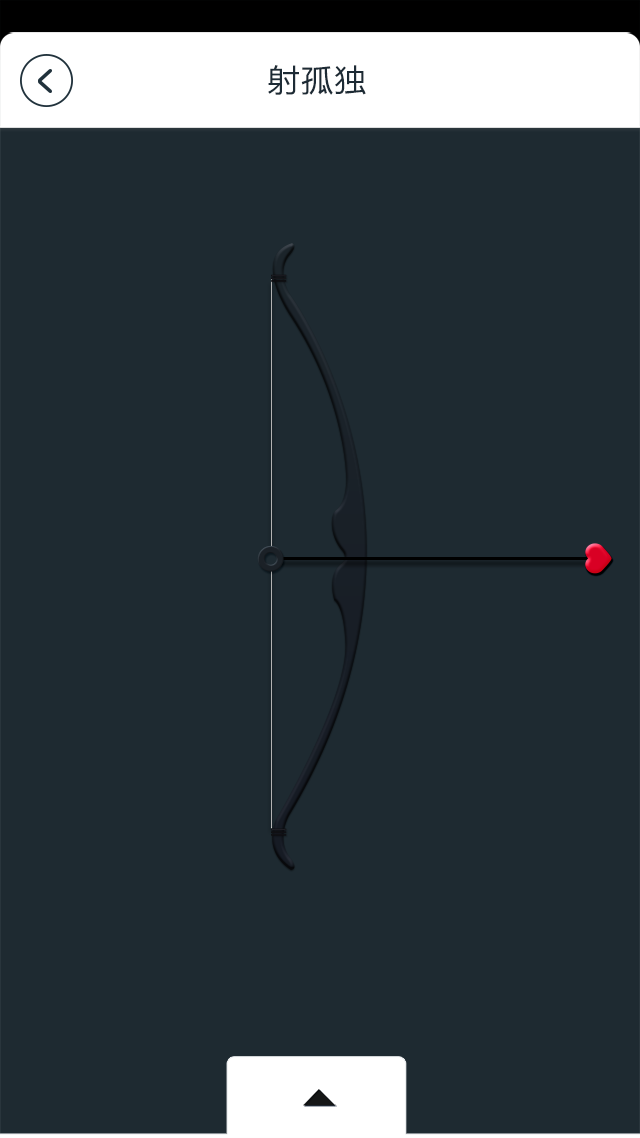
<style>
.page{position:relative;width:640px;height:1138px;background:#1e2a31}
.page>*{position:absolute;margin:0}
.t1{font:31.1px "MicrosoftYaHei";letter-spacing:0.05em;color:#1d2b35}
</style>
<div class="page">
<p class="t1" style="left:268px;top:65px;width:98px;height:30px">射孤独</p>
</div>
